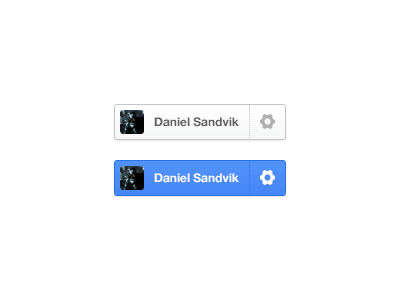
<style>
.page{position:relative;width:400px;height:300px;background:#ffffff}
.page>*{position:absolute;margin:0}
.t1{font:12px "HelveticaNeue-Bold";color:#5d5d5d}
.t2{font:12px "HelveticaNeue-Bold";color:#ffffff}
</style>
<div class="page">
<p class="t1" style="left:154px;top:117px;width:85px;height:10px">Daniel Sandvik</p>
<p class="t2" style="left:154px;top:173px;width:85px;height:10px">Daniel Sandvik</p>
</div>
